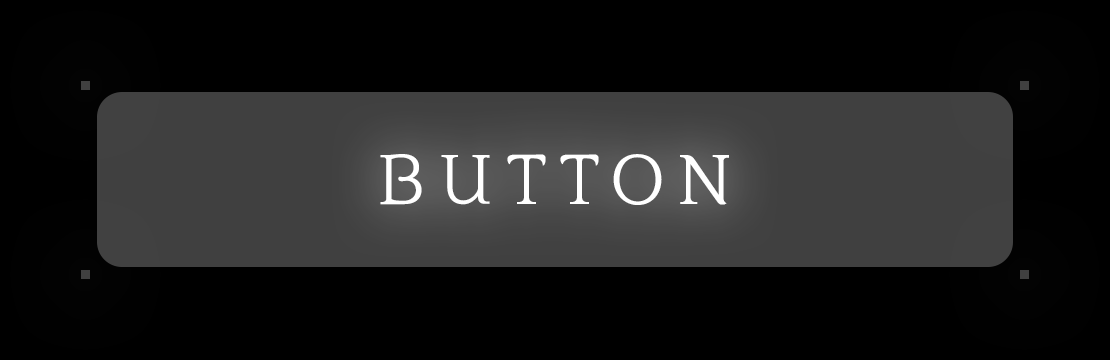
<style>
.page{position:relative;width:1110px;height:360px;background:#000000}
.page>*{position:absolute;margin:0}
.t1{font:72px "Barkentina";letter-spacing:0.2em;color:#ffffff}
</style>
<div class="page">
<p class="t1" style="left:380px;top:154px;width:349px;height:51px">BUTTON</p>
</div>
